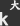
<style>
.page{position:relative;width:20px;height:26px;background:#333333}
.page>*{position:absolute;margin:0}
.t1{font:12px "DFKaiShu-SB-Estd-BF";color:#ececec;font-weight:bold}
.t2{font:18px "ArialMT";color:#ececec;font-weight:bold}
</style>
<div class="page">
<p class="t1" style="left:9px;top:0px;width:12px;height:10px">大</p>
<p class="t2" style="left:0px;top:12px;width:9px;height:14px">k</p>
</div>
